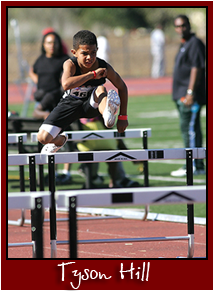
<style>
.page{position:relative;width:214px;height:291px}
.page>*{position:absolute;margin:0}
.t1{font:25px "BetinaScript";color:#ffffff}
</style>
<div class="page">
<p class="t1" style="left:57px;top:262px;width:93px;height:27px">Tyson Hill</p>
</div>
